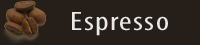
<style>
.page{position:relative;width:200px;height:45px;background:#261e18}
.page>*{position:absolute;margin:0}
.t1{font:26.8px "MyriadPro-Cond";letter-spacing:0.04em;color:#e9e9e9;scale:1.28 1}
</style>
<div class="page">
<p class="t1" style="left:72px;top:12px;width:96px;height:24px">Espresso</p>
</div>
